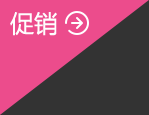
<style>
.page{position:relative;width:149px;height:115px;background:#333333}
.page>*{position:absolute;margin:0}
.t1{font:24px "MicrosoftYaHei";color:#fefefe}
</style>
<div class="page">
<p class="t1" style="left:10px;top:12px;width:47px;height:24px">促销</p>
</div>
